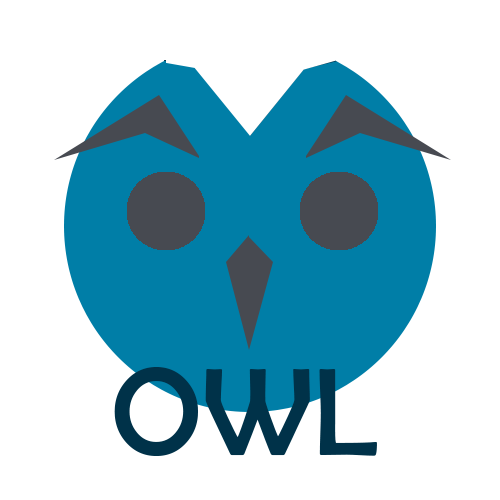
<style>
.page{position:relative;width:500px;height:500px;background:#ffffff}
.page>*{position:absolute;margin:0}
.t1{font:125px "BerlinSansFB-Reg";color:#003249}
</style>
<div class="page">
<p class="t1" style="left:114px;top:367px;width:263px;height:89px">OWL</p>
</div>
